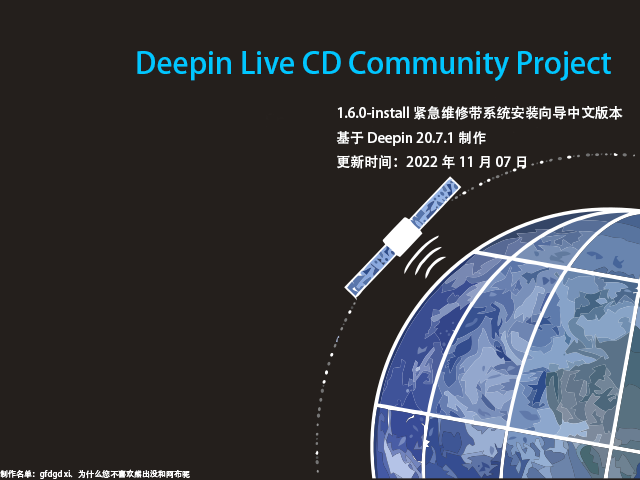
<style>
.page{position:relative;width:640px;height:480px;background:#241f1c}
.page>*{position:absolute;margin:0}
.t1{font:30px "AdobeHeitiStd-Regular";color:#00c6ff}
.t2{font:14px "AdobeHeitiStd-Regular";color:#ffffff}
.t3{font:8px "AdobeHeitiStd-Regular";color:#ffffff}
</style>
<div class="page">
<p class="t1" style="left:137px;top:51px;width:474px;height:30px">Deepin Live CD Community Project</p>
<p class="t2" style="left:336px;top:105px;width:287px;height:64px">1.6.0-install 紧急维修带系统安装向导中文版本<br>基于 Deepin 20.7.1制作<br>更新时间：2022年11月07日</p>
<p class="t3" style="left:0px;top:469px;width:190px;height:10px">制作名单：gfdgd xi、为什么您不喜欢熊出没和阿布呢</p>
</div>
